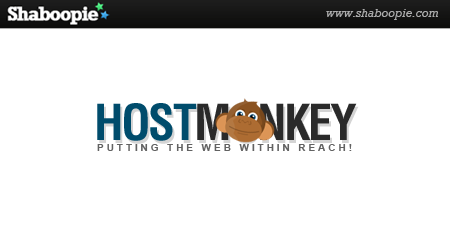
<style>
.page{position:relative;width:450px;height:250px;background:#ffffff}
.page>*{position:absolute;margin:0}
.t1{font:48.3px "Helvetica-Condensed-Bold";letter-spacing:-0.05em;color:#2a2a2a}
.t2{font:48.3px "Helvetica-Condensed-Bold";letter-spacing:-0.05em;color:#004c6c}
.t3{font:10.4px "Arial-BoldMT";letter-spacing:-0.01em;color:#626262}
</style>
<div class="page">
<p class="t1" style="left:97px;top:103px;width:260px;height:38px"><span class="t2">HOST</span>MONKEY</p>
<p class="t3" style="left:97px;top:144px;width:255px;height:7px">P U T T I N G   T H E   W E B   W I T H I N   R E A C H !</p>
</div>
